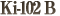
<style>
.page{position:relative;width:60px;height:16px;background:#ffffff}
.page>*{position:absolute;margin:0}
.t1{font:17px "RyuminPro-ExBold";letter-spacing:-0.08em;color:#4a3f32;font-weight:bold;scale:0.9 1}
</style>
<div class="page">
<p class="t1" style="left:0px;top:1px;width:56px;height:14px">Ki-102 B</p>
</div>
